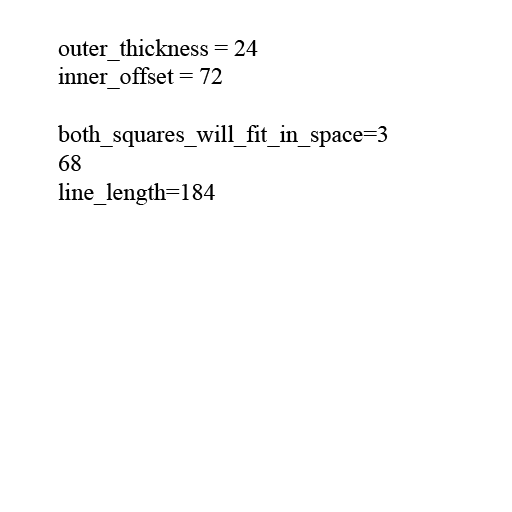
<style>
.page{position:relative;width:512px;height:512px;background:#ffffff}
.page>*{position:absolute;margin:0}
.t1{font:24px "TimesNewRomanPSMT";color:#000000}
</style>
<div class="page">
<p class="t1" style="left:58px;top:39px;width:330px;height:166px">outer_thickness = 24<br>inner_offset = 72<br><br>both_squares_will_fit_in_space=368<br>line_length=184</p>
</div>
